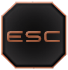
<style>
.page{position:relative;width:68px;height:70px}
.page>*{position:absolute;margin:0}
.t1{font:22px "Nebula";color:#a55e40}
</style>
<div class="page">
<p class="t1" style="left:7px;top:31px;width:53px;height:11px">ESC</p>
</div>
